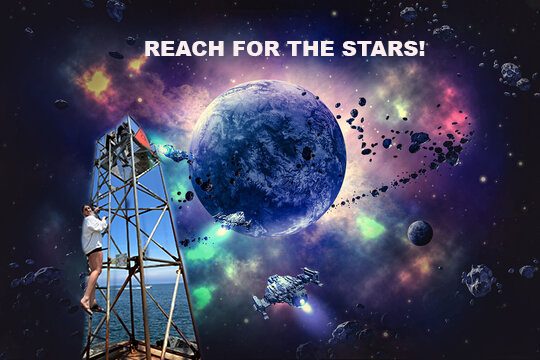
<style>
.page{position:relative;width:540px;height:360px}
.page>*{position:absolute;margin:0}
.t1{font:21px "Arial-Black";color:#f9eded}
</style>
<div class="page">
<p class="t1" style="left:145px;top:41px;width:280px;height:15px">REACH FOR THE STARS!</p>
</div>
